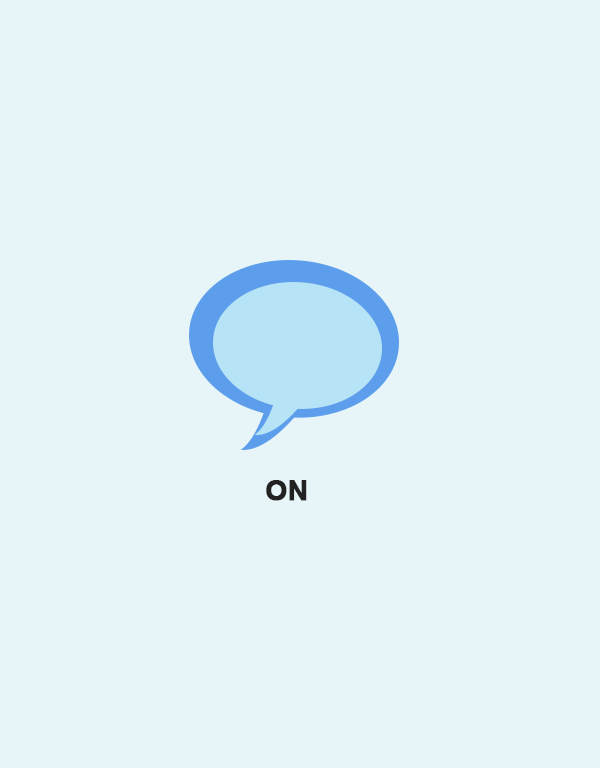
<style>
.page{position:relative;width:600px;height:768px;background:#e7f5f9}
.page>*{position:absolute;margin:0}
.t1{font:28px "Arial-BoldMT";color:#222222;font-weight:bold}
</style>
<div class="page">
<p class="t1" style="left:266px;top:480px;width:41px;height:21px">ON</p>
</div>
